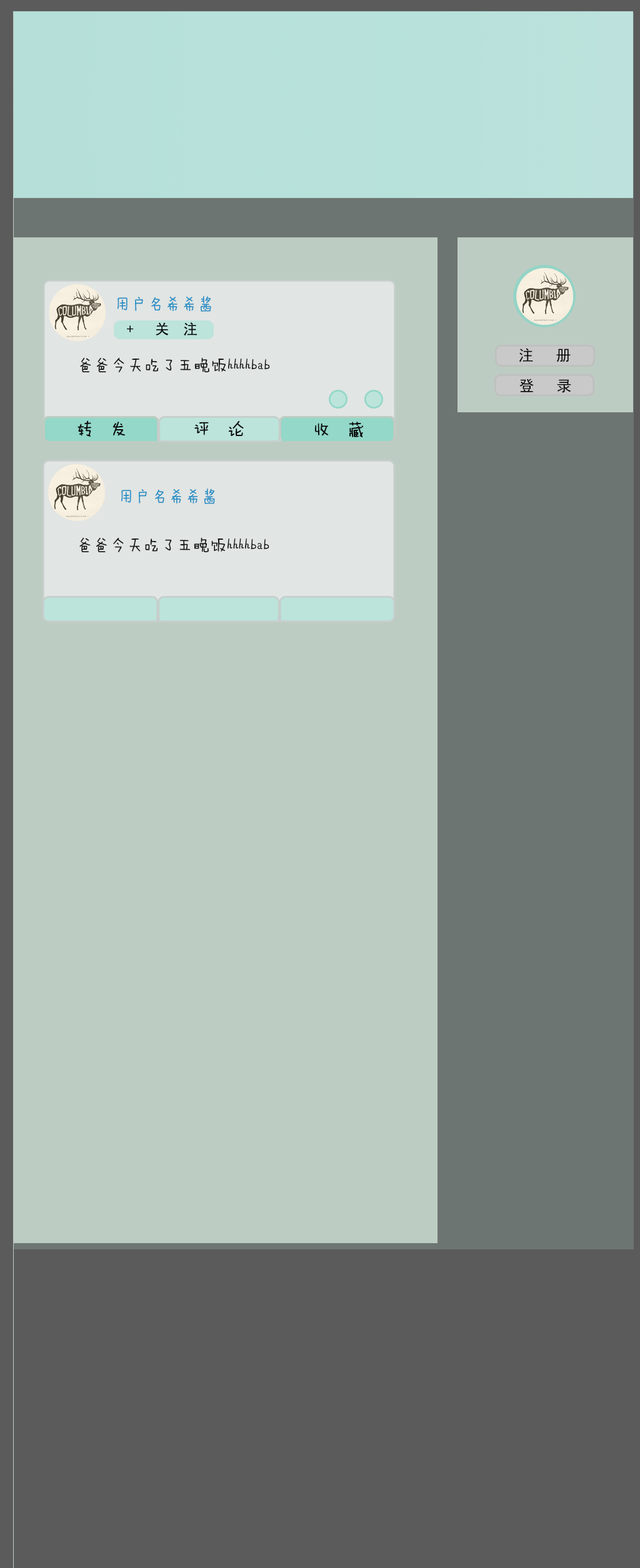
<style>
.page{position:relative;width:640px;height:1568px;background:#bdccc2}
.page>*{position:absolute;margin:0}
.t1{font:16.7px "FZMWJW--GB1-0";color:#2e91c6}
.t2{font:14.2px "SimHei";color:#0a0b0b}
.t3{font:15px "SimHei";color:#000000}
.t4{font:16.7px "FZMWJW--GB1-0";color:#151717}
.t5{font:16.7px "FZMWJW--GB1-0";color:#0a0b0b}
</style>
<div class="page">
<p class="t1" style="left:117px;top:296px;width:94px;height:16px">用户名希希酱</p>
<p class="t2" style="left:127px;top:322px;width:70px;height:14px">+   关  注</p>
<p class="t3" style="left:519px;top:348px;width:51px;height:14px">注   册</p>
<p class="t4" style="left:80px;top:357px;width:190px;height:15px">爸爸今天吃了五晚饭hhhhbab</p>
<p class="t3" style="left:519px;top:379px;width:52px;height:14px">登   录</p>
<p class="t5" style="left:77px;top:420px;width:48px;height:17px">转   发</p>
<p class="t5" style="left:194px;top:420px;width:50px;height:16px">评   论</p>
<p class="t5" style="left:315px;top:422px;width:48px;height:15px">收   藏</p>
<p class="t1" style="left:121px;top:489px;width:94px;height:15px">用户名希希酱</p>
<p class="t4" style="left:79px;top:537px;width:190px;height:15px">爸爸今天吃了五晚饭hhhhbab</p>
</div>
